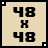
<style>
.page{position:relative;width:48px;height:48px;background:#e8d7b5}
.page>*{position:absolute;margin:0}
.t1{font:12px "8BITWONDERNominal";color:#000000}
.t2{font:9px "8BITWONDERNominal";color:#000000}
</style>
<div class="page">
<p class="t1" style="left:13px;top:7px;width:23px;height:35px;text-align:center">48 <br><span class="t2">x<br></span>48</p>
</div>
